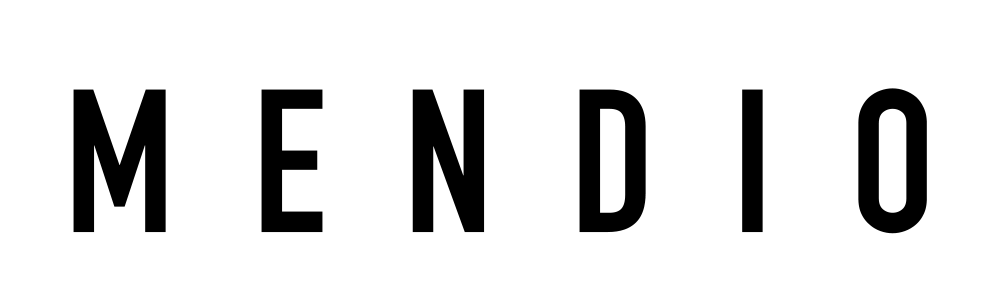
<style>
.page{position:relative;width:1000px;height:300px;background:#ffffff}
.page>*{position:absolute;margin:0}
.t1{font:200px "DINCondensed-Bold";letter-spacing:0.1em;color:#000000}
</style>
<div class="page">
<p class="t1" style="left:73px;top:88px;width:854px;height:146px">M E N D I O</p>
</div>
